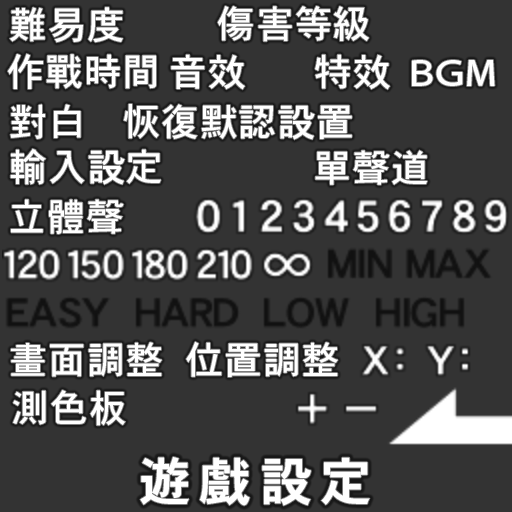
<style>
.page{position:relative;width:512px;height:512px;background:#333333}
.page>*{position:absolute;margin:0}
.t1{font:38px "HeiseiKakuGoStd-W5";letter-spacing:0.02em;color:#ffffff}
.t2{font:38px "HeiseiKakuGoStd-W5";letter-spacing:0.01em;color:#ffffff}
.t3{font:52px "HeiseiKakuGoStd-W7";letter-spacing:0.16em;color:#ffffff}
</style>
<div class="page">
<p class="t1" style="left:217px;top:6px;width:152px;height:36px">傷害等級</p>
<p class="t1" style="left:9px;top:7px;width:114px;height:36px">難易度</p>
<p class="t2" style="left:7px;top:53px;width:149px;height:36px">作戰時間</p>
<p class="t1" style="left:171px;top:54px;width:74px;height:36px">音效</p>
<p class="t1" style="left:315px;top:54px;width:75px;height:36px">特效</p>
<p class="t1" style="left:412px;top:60px;width:83px;height:26px">BGM</p>
<p class="t1" style="left:10px;top:104px;width:71px;height:35px">對白</p>
<p class="t1" style="left:123px;top:104px;width:229px;height:36px">恢復默認設置</p>
<p class="t1" style="left:10px;top:148px;width:151px;height:37px">輸入設定</p>
<p class="t1" style="left:315px;top:150px;width:113px;height:35px">單聲道</p>
<p class="t1" style="left:11px;top:199px;width:113px;height:35px">立體聲</p>
<p class="t1" style="left:11px;top:342px;width:151px;height:35px">畫面調整</p>
<p class="t1" style="left:186px;top:341px;width:152px;height:36px">位置調整</p>
<p class="t1" style="left:13px;top:390px;width:113px;height:36px">測色板</p>
<p class="t3" style="left:140px;top:457px;width:230px;height:49px">遊戲設定</p>
</div>
